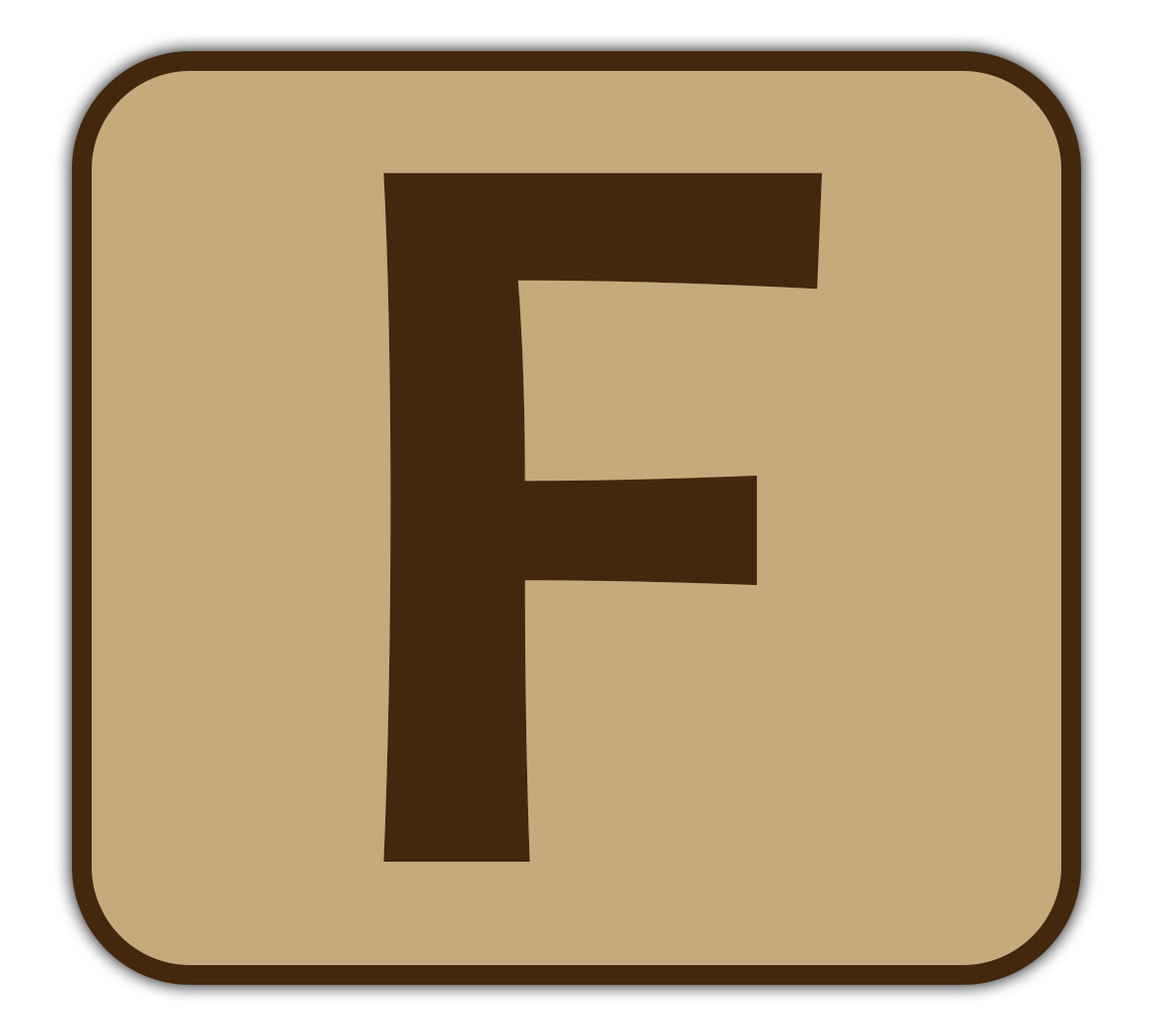
<style>
.page{position:relative;width:1151px;height:1036px;background:#c6aa7b}
.page>*{position:absolute;margin:0}
.t1{font:1083.6px "Candara-Bold";color:#43280d}
</style>
<div class="page">
<p class="t1" style="left:383px;top:172px;width:440px;height:690px">F</p>
</div>
